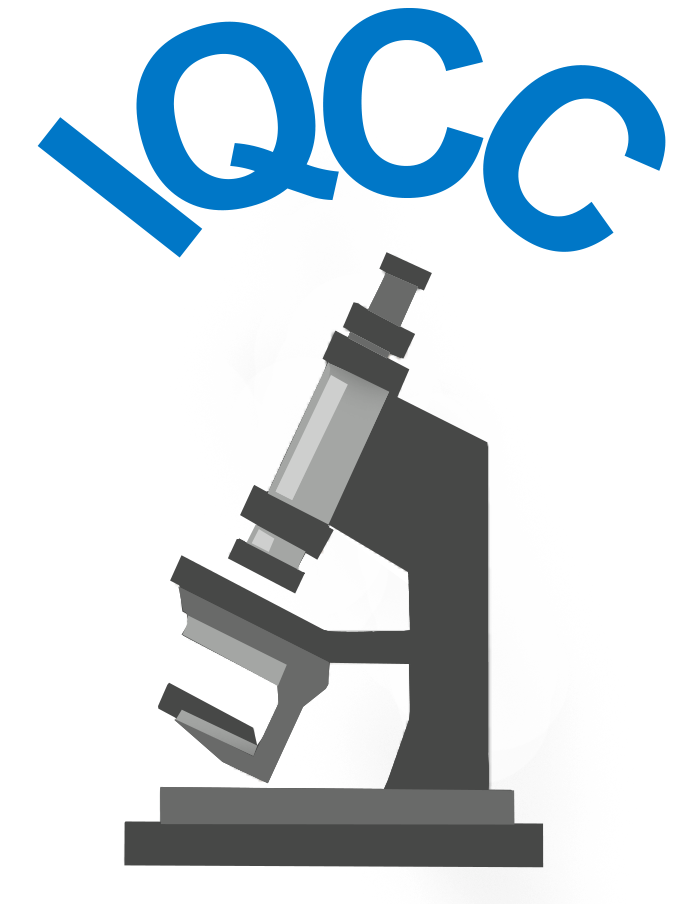
<style>
.page{position:relative;width:689px;height:904px;background:#ffffff}
.page>*{position:absolute;margin:0}
.t1{font:256.8px "Arial-BoldMT";color:#0077c7}
.t2{font:252.8px "Arial-BoldMT";color:#0077c7}
.t3{font:252.2px "Arial-BoldMT";color:#0077c7}
</style>
<div class="page">
<p class="t1" style="left:323px;top:8px;width:161px;height:190px">C</p>
<p class="t2" style="left:136px;top:21px;width:203px;height:190px;rotate:-15deg">Q</p>
<p class="t1" style="left:483px;top:65px;width:183px;height:187px;rotate:37deg">C</p>
<p class="t3" style="left:37px;top:117px;width:166px;height:141px;rotate:-52deg">I</p>
</div>
